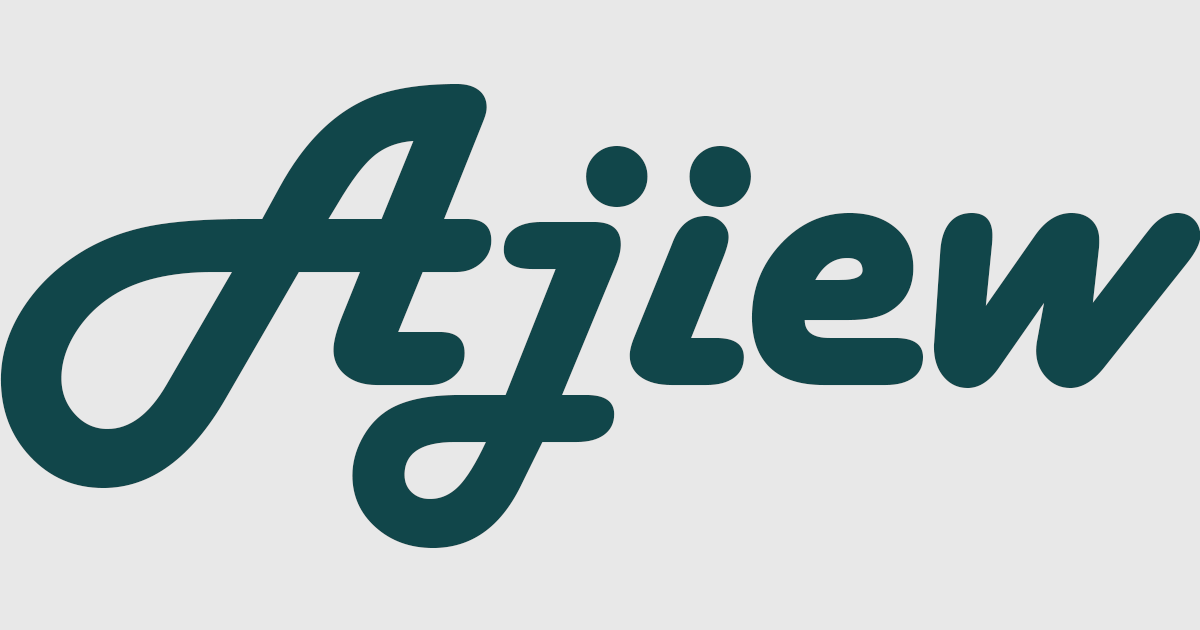
<style>
.page{position:relative;width:1200px;height:630px;background:#e8e8e8}
.page>*{position:absolute;margin:0}
.t1{font:452px "HarlowSolid";color:#11464a}
</style>
<div class="page">
<p class="t1" style="left:0px;top:84px;width:1201px;height:464px">Ajiew</p>
</div>
